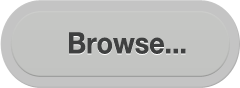
<style>
.page{position:relative;width:240px;height:88px;background:#c4c4c4}
.page>*{position:absolute;margin:0}
.t1{font:29.5px "HelveticaNeue-Bold";color:#3f4040;scale:0.91 1}
</style>
<div class="page">
<p class="t1" style="left:69px;top:32px;width:117px;height:22px">Browse...</p>
</div>
